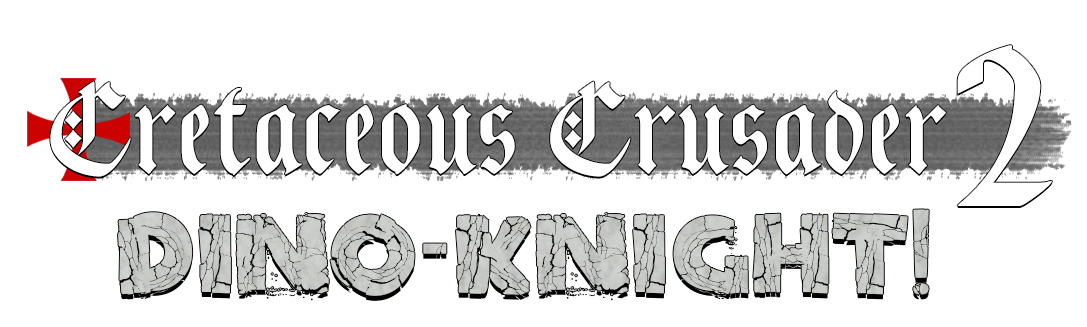
<style>
.page{position:relative;width:1087px;height:327px;background:#ffffff}
.page>*{position:absolute;margin:0}
.t1{font:254.6px "BlackKnightFLF";color:#fffefe;scale:1.26 1}
.t2{font:145.1px "BlackKnightFLF";color:#ffffff}
</style>
<div class="page">
<p class="t1" style="left:957px;top:45px;width:95px;height:161px">2</p>
<p class="t2" style="left:50px;top:81px;width:896px;height:96px">Cretaceous Crusader</p>
</div>
